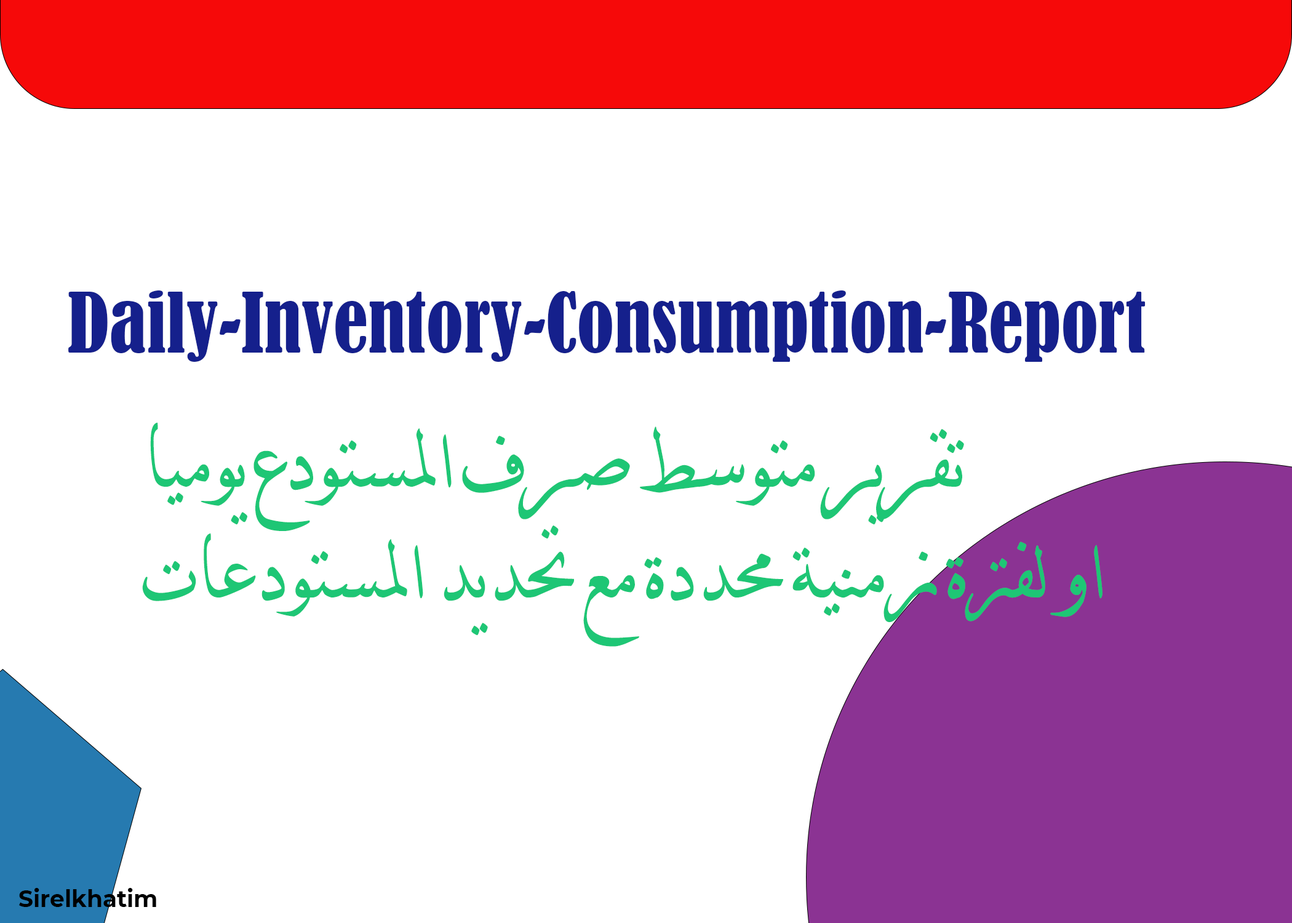
<style>
.page{position:relative;width:1292px;height:923px;background:#ffffff}
.page>*{position:absolute;margin:0}
.t1{font:76.9px "BernardMT-Condensed";color:#15208c}
.t2{font:92.3px "DecoTypeNaskhVariants";color:#1ec675}
</style>
<div class="page">
<p class="t1" style="left:68px;top:290px;width:1078px;height:72px">Daily-Inventory-Consumption-Report</p>
<p class="t2" style="left:142px;top:422px;width:961px;height:225px">تقرير متوسط صرف المستودع يوميا <br>او لفترة زمنية محددة مع تحديد المستودعات</p>
</div>
